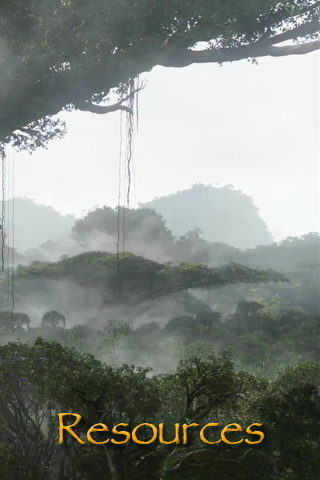
<style>
.page{position:relative;width:320px;height:480px}
.page>*{position:absolute;margin:0}
.t1{font:72px "ParchmentMF"}
</style>
<div class="page">
<p class="t1" style="left:58px;top:413px;width:207px;height:31px">Resources</p>
</div>
